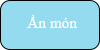
<style>
.page{position:relative;width:100px;height:50px;background:#94dbf0}
.page>*{position:absolute;margin:0}
.t1{font:15.3px "TimesNewRomanPSMT";color:#fefefe}
</style>
<div class="page">
<p class="t1" style="left:27px;top:15px;width:50px;height:13px">Ẩn món</p>
</div>
